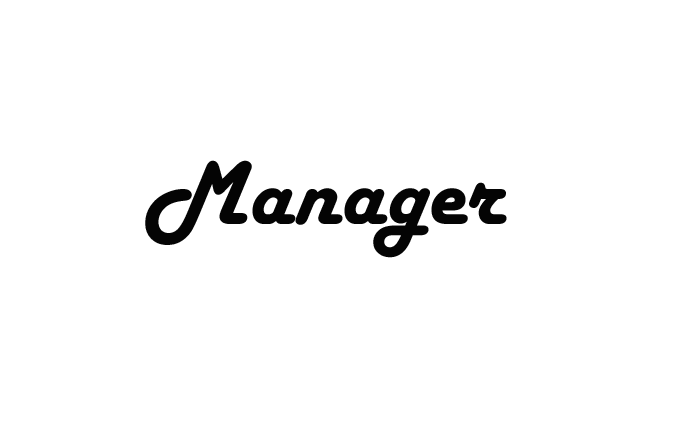
<style>
.page{position:relative;width:675px;height:425px;background:#ffffff}
.page>*{position:absolute;margin:0}
.t1{font:93.8px "HarlowSolid";color:#040404}
</style>
<div class="page">
<p class="t1" style="left:145px;top:160px;width:362px;height:98px">Manager</p>
</div>
